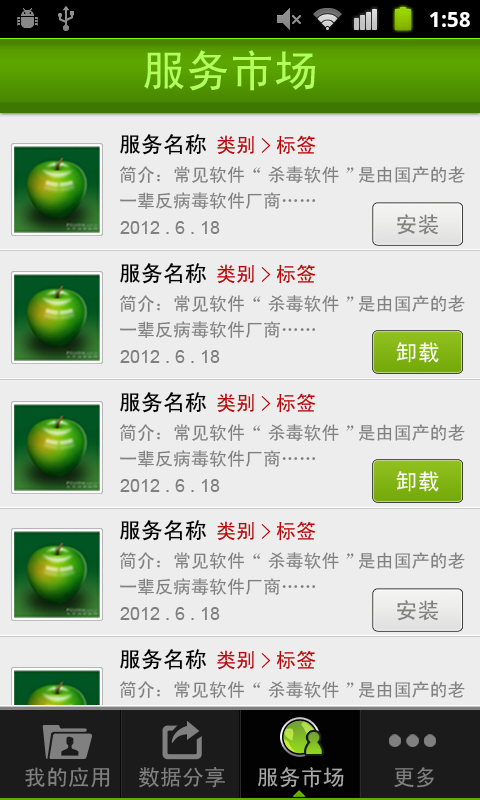
<style>
.page{position:relative;width:480px;height:800px;background:#eeeded}
.page>*{position:absolute;margin:0}
.t1{font:44px "SimHei";color:#b0ff5f}
.t2{font:22px "SimHei";color:#000000}
.t3{font:20px "SimHei";color:#b60909}
.t4{font:18px/26px "SimHei";color:#808080}
.t5{font:18px "ArialMT";color:#808080}
.t6{font:22px "SimHei";color:#808080}
.t7{font:22px "SimHei";color:#ffffff}
.t8{font:22px "SimHei";color:#a6a6a6}
</style>
<div class="page">
<p class="t1" style="left:144px;top:50px;width:172px;height:41px">服务市场</p>
<p class="t2" style="left:120px;top:134px;width:86px;height:21px">服务名称</p>
<p class="t3" style="left:217px;top:135px;width:99px;height:20px">类别&gt;标签</p>
<p class="t4" style="left:120px;top:166px;width:345px;height:44px">简介：常见软件 “杀毒软件”是由国产的老<br>一辈反病毒软件厂商……</p>
<p class="t5" style="left:120px;top:221px;width:100px;height:13px">2012 . 6 . 18</p>
<p class="t6" style="left:397px;top:214px;width:42px;height:21px">安装</p>
<p class="t2" style="left:120px;top:263px;width:86px;height:21px">服务名称</p>
<p class="t3" style="left:217px;top:264px;width:99px;height:20px">类别&gt;标签</p>
<p class="t4" style="left:120px;top:295px;width:345px;height:44px">简介：常见软件 “杀毒软件”是由国产的老<br>一辈反病毒软件厂商……</p>
<p class="t7" style="left:396px;top:342px;width:43px;height:21px">卸载</p>
<p class="t5" style="left:120px;top:350px;width:100px;height:13px">2012 . 6 . 18</p>
<p class="t2" style="left:120px;top:392px;width:86px;height:21px">服务名称</p>
<p class="t3" style="left:217px;top:393px;width:99px;height:20px">类别&gt;标签</p>
<p class="t4" style="left:120px;top:424px;width:345px;height:44px">简介：常见软件 “杀毒软件”是由国产的老<br>一辈反病毒软件厂商……</p>
<p class="t7" style="left:396px;top:471px;width:43px;height:21px">卸载</p>
<p class="t5" style="left:120px;top:479px;width:100px;height:13px">2012 . 6 . 18</p>
<p class="t2" style="left:120px;top:520px;width:86px;height:21px">服务名称</p>
<p class="t3" style="left:217px;top:521px;width:99px;height:20px">类别&gt;标签</p>
<p class="t4" style="left:120px;top:552px;width:345px;height:44px">简介：常见软件 “杀毒软件”是由国产的老<br>一辈反病毒软件厂商……</p>
<p class="t6" style="left:397px;top:600px;width:42px;height:21px">安装</p>
<p class="t5" style="left:120px;top:607px;width:100px;height:13px">2012 . 6 . 18</p>
<p class="t2" style="left:120px;top:649px;width:86px;height:21px">服务名称</p>
<p class="t3" style="left:217px;top:650px;width:99px;height:20px">类别&gt;标签</p>
<p class="t6" style="left:25px;top:767px;width:85px;height:21px">我的应用</p>
<p class="t6" style="left:139px;top:767px;width:86px;height:21px">数据分享</p>
<p class="t8" style="left:258px;top:767px;width:86px;height:21px">服务市场</p>
<p class="t6" style="left:394px;top:767px;width:40px;height:21px">更多</p>
</div>
